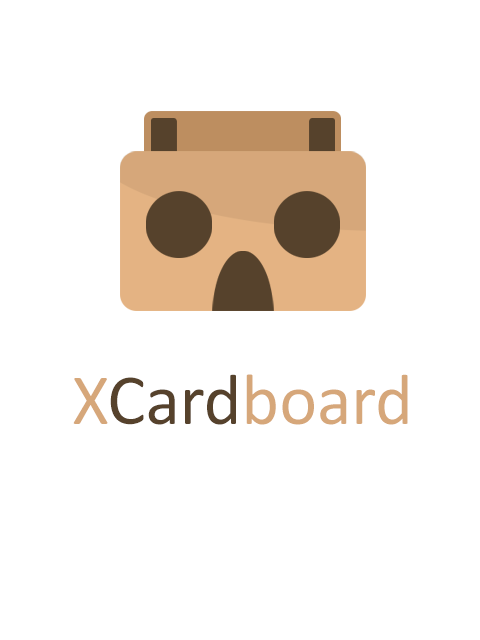
<style>
.page{position:relative;width:480px;height:640px;background:#ffffff}
.page>*{position:absolute;margin:0}
.t1{font:72.1px "Calibri";color:#d6a77a}
.t2{font:72.1px "Calibri";color:#56422c}
</style>
<div class="page">
<p class="t1" style="left:73px;top:374px;width:335px;height:51px">X<span class="t2">Card</span>board</p>
</div>
